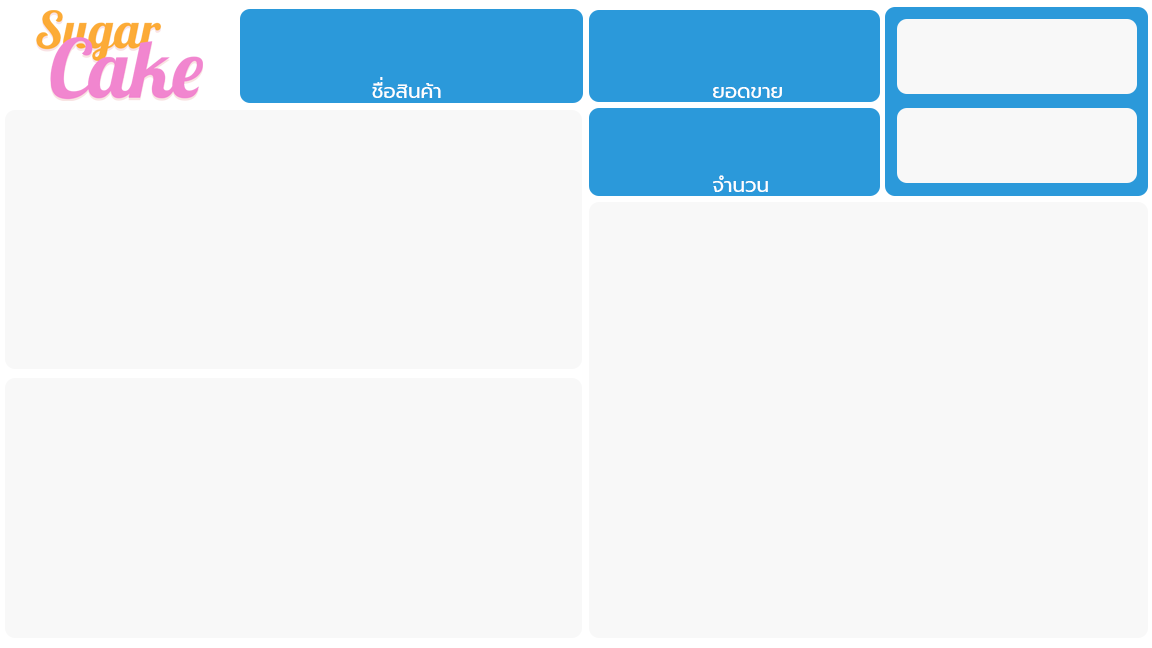
<style>
.page{position:relative;width:1152px;height:648px;background:#f8f8f8}
.page>*{position:absolute;margin:0}
.t1{font:20px "Prompt-Regular";color:#ffffff}
</style>
<div class="page">
<p class="t1" style="left:372px;top:77px;width:69px;height:21px">ชื่อสินค้า</p>
<p class="t1" style="left:713px;top:87px;width:69px;height:11px">ยอดขาย</p>
<p class="t1" style="left:713px;top:175px;width:55px;height:17px">จำนวน</p>
</div>
